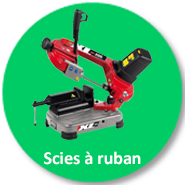
<style>
.page{position:relative;width:185px;height:185px;background:#00cc66}
.page>*{position:absolute;margin:0}
.t1{font:18px "Calibri-Bold";color:#ffffff}
</style>
<div class="page">
<p class="t1" style="left:44px;top:151px;width:97px;height:14px">Scies à ruban</p>
</div>
